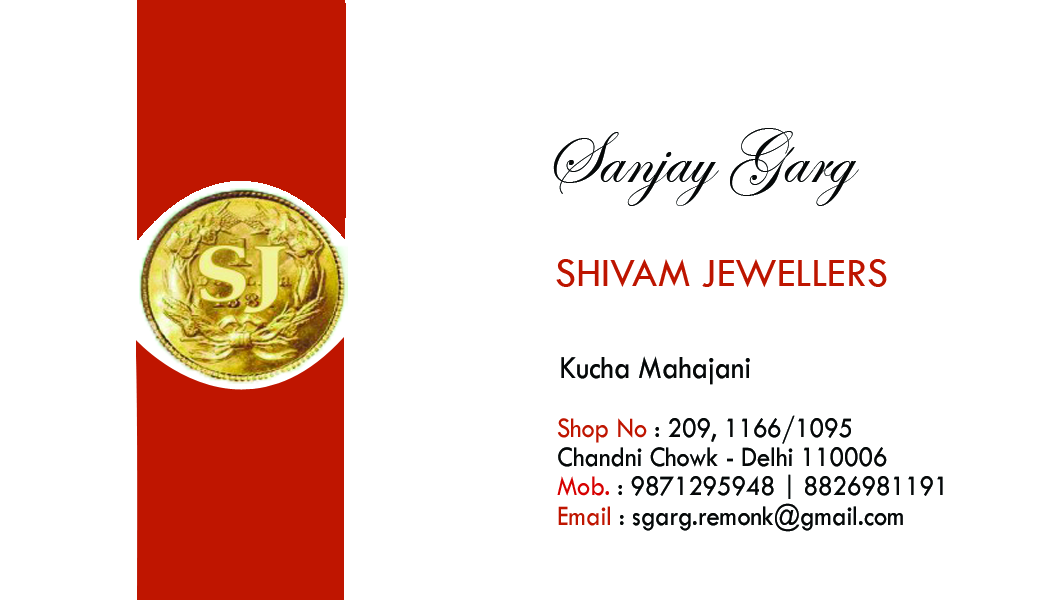
<style>
.page{position:relative;width:1050px;height:600px;background:#ffffff}
.page>*{position:absolute;margin:0}
.t1{font:75px "EdwardianScriptITC";color:#060808}
.t2{font:41.7px "TwCenMT-Regular";color:#bd1500}
.t3{font:33.3px "TwCenMT-Regular";color:#060808;scale:0.9 1}
.t4{font:29.2px/29.2px "TwCenMT-Regular";color:#060808;scale:0.9 1}
.t5{font:29.2px/29.2px "TwCenMT-Regular";color:#be1500;scale:0.9 1}
.t6{font:29.2px/29.2px "TwCenMT-Regular";color:#d70000;scale:0.9 1}
</style>
<div class="page">
<p class="t1" style="left:553px;top:128px;width:306px;height:78px">Sanjay Garg</p>
<p class="t2" style="left:556px;top:259px;width:331px;height:29px">SHIVAM JEWELLERS</p>
<p class="t3" style="left:561px;top:356px;width:189px;height:29px">Kucha Mahajani</p>
<p class="t4" style="left:557px;top:415px;width:386px;height:117px"><span class="t5">Shop No</span> : 209, 1166/1095<br>Chandni Chowk - Delhi 110006<br><span class="t6">Mob.</span> : 9871295948 | 8826981191<br><span class="t5">Email</span> : sgarg.remonk@gmail.com</p>
</div>
